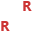
<style>
.page{position:relative;width:32px;height:32px;background:#ffffff}
.page>*{position:absolute;margin:0}
.t1{font:14px "NirmalaUI-Bold";letter-spacing:-0.05em;color:#cc3333}
</style>
<div class="page">
<p class="t1" style="left:23px;top:1px;width:9px;height:10px">R</p>
<p class="t1" style="left:1px;top:21px;width:9px;height:10px">R</p>
</div>
